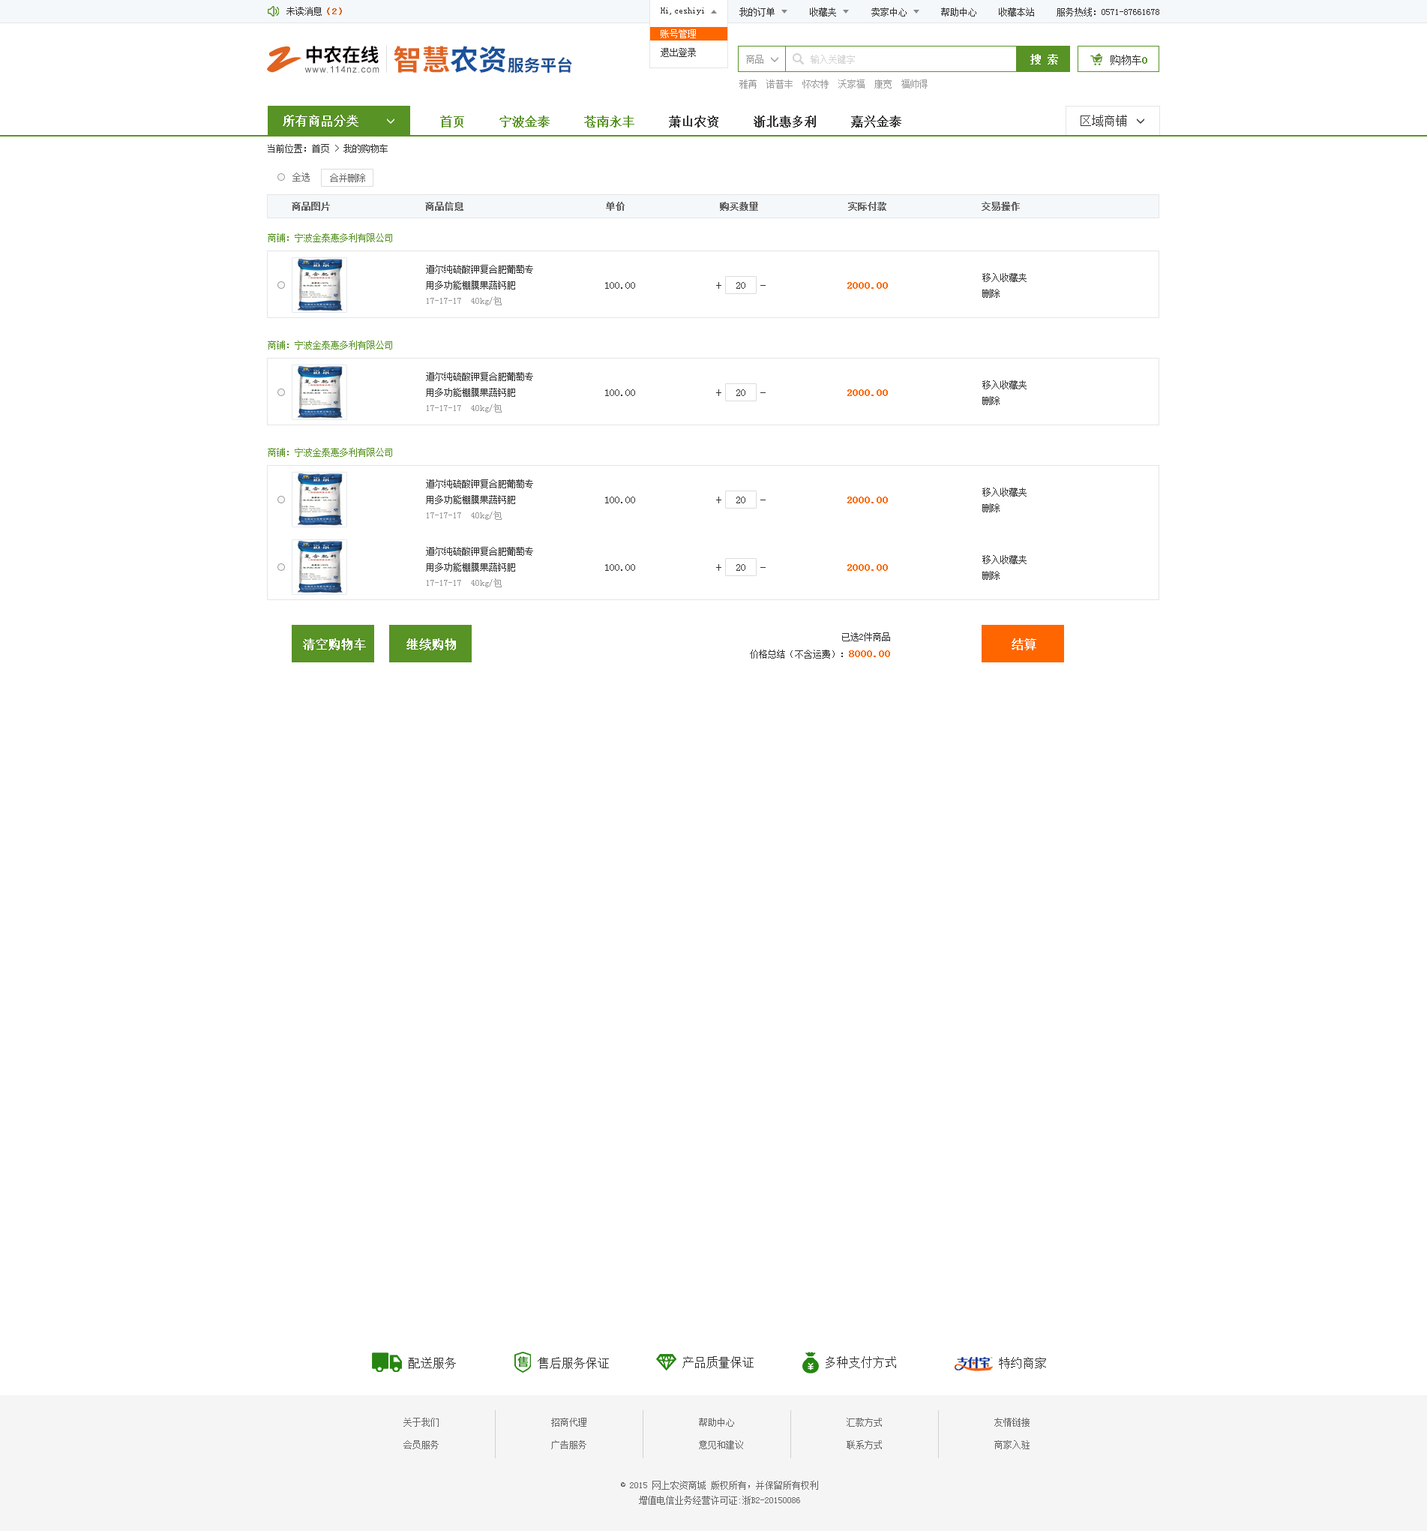
<style>
.page{position:relative;width:1427px;height:1537px;background:#ffffff}
.page>*{position:absolute;margin:0}
.t1{font:9px "SimSun";color:#333333}
.t2{font:9px "SimSun";color:#e0631f;font-weight:bold}
.t3{font:9px/18.8px "SimSun";color:#ffffff}
.t4{font:9px/18.8px "SimSun";color:#333333}
.t5{font:38px "SmudgerLetPlain";color:#e0631f}
.t6{font:18.6px "SourceHanSansCN-Bold";color:#060001}
.t7{font:28.4px "SourceHanSansCN-Bold";color:#e0631f}
.t8{font:28.4px "SourceHanSansCN-Bold";color:#1a529c}
.t9{font:10.5px "SimSun";color:#ffffff;font-weight:bold}
.t10{font:16.3px "SourceHanSansCN-Bold";color:#194f93}
.t11{font:9px "SimSun";color:#999999}
.t12{font:9px "SimSun";color:#d1d1d1}
.t13{font:10.5px "SimSun";color:#333333}
.t14{font:10.5px "SimSun";color:#589325;font-weight:bold}
.t15{font:8.9px "ArialMT";letter-spacing:0.1em;color:#585859}
.t16{font:12px "SimSun";color:#ffffff;font-weight:bold}
.t17{font:12px "SimSun";color:#333333;font-weight:bold}
.t18{font:12px "SimSun";color:#589325;font-weight:bold}
.t19{font:12px "SimSun";color:#333333}
.t20{font:9px "SimSun";color:#666666}
.t21{font:9px "SimSun";color:#666666;font-weight:bold}
.t22{font:9px "SimSun";color:#589325}
.t23{font:10.5px "SimSun";color:#ff6600;font-weight:bold}
.t24{font:9px/22.5px "SimSun";color:#666666}
.t25{font:9px/15px "SimSun";color:#666666}
</style>
<div class="page">
<p class="t1" style="left:286px;top:7px;width:56px;height:9px">未读消息<span class="t2">（2）</span></p>
<p class="t1" style="left:661px;top:8px;width:43px;height:7px">Hi,ceshiyi</p>
<p class="t1" style="left:661px;top:8px;width:43px;height:7px">Hi,ceshiyi</p>
<p class="t1" style="left:740px;top:8px;width:35px;height:8px">我的订单</p>
<p class="t1" style="left:810px;top:8px;width:26px;height:8px">收藏夹</p>
<p class="t1" style="left:872px;top:8px;width:35px;height:8px">卖家中心</p>
<p class="t1" style="left:941px;top:8px;width:35px;height:8px">帮助中心</p>
<p class="t1" style="left:999px;top:8px;width:35px;height:8px">收藏本站</p>
<p class="t1" style="left:1057px;top:8px;width:103px;height:8px">服务热线：0571-87661678</p>
<p class="t3" style="left:661px;top:29px;width:35px;height:28px">账号管理<br><span class="t4">退出登录</span></p>
<p class="t5" style="left:267px;top:46px;width:35px;height:27px">Z</p>
<p class="t6" style="left:306px;top:46px;width:73px;height:18px">中农在线</p>
<p class="t7" style="left:394px;top:46px;width:112px;height:27px">智慧<span class="t8">农资</span></p>
<p class="t9" style="left:1030px;top:54px;width:28px;height:10px">搜 索</p>
<p class="t10" style="left:508px;top:57px;width:64px;height:16px">服务平台</p>
<p class="t11" style="left:746px;top:55px;width:18px;height:9px">商品</p>
<p class="t12" style="left:811px;top:55px;width:44px;height:9px">输入关键字</p>
<p class="t13" style="left:1111px;top:55px;width:37px;height:10px">购物车<span class="t14">0</span></p>
<p class="t15" style="left:304px;top:66px;width:76px;height:7px">www.114nz.com</p>
<p class="t11" style="left:740px;top:80px;width:188px;height:8px">雅苒  诺普丰  怀农特  沃家福  康宽  福帅得</p>
<p class="t16" style="left:283px;top:115px;width:75px;height:12px">所有商品分类</p>
<p class="t17" style="left:440px;top:116px;width:462px;height:12px"><span class="t18">首页     宁波金泰     苍南永丰    </span> 萧山农资     浙北惠多利     嘉兴金泰</p>
<p class="t19" style="left:1081px;top:115px;width:46px;height:12px">区域商铺</p>
<p class="t1" style="left:268px;top:144px;width:120px;height:9px">当前位置：首页 &gt; 我的购物车</p>
<p class="t20" style="left:292px;top:172px;width:18px;height:10px">全选</p>
<p class="t20" style="left:330px;top:173px;width:35px;height:9px">合并删除</p>
<p class="t21" style="left:292px;top:202px;width:728px;height:9px">商品图片                  商品信息                           单价                  购买数量                 实际付款                  交易操作</p>
<p class="t22" style="left:268px;top:233px;width:124px;height:9px">商铺：宁波金泰惠多利有限公司</p>
<p class="t1" style="left:426px;top:265px;width:107px;height:40px">道尔纯硫酸钾复合肥葡萄专<br>用多功能棚膜果蔬钙肥<br><span class="t11">17-17-17  40kg/包</span></p>
<p class="t1" style="left:982px;top:273px;width:45px;height:25px">移入收藏夹<br>删除</p>
<p class="t13" style="left:605px;top:282px;width:30px;height:7px">100.00</p>
<p class="t19" style="left:716px;top:282px;width:6px;height:7px">+</p>
<p class="t13" style="left:736px;top:282px;width:10px;height:7px">20</p>
<p class="t23" style="left:848px;top:282px;width:40px;height:7px">2000.00</p>
<p class="t22" style="left:268px;top:340px;width:124px;height:10px">商铺：宁波金泰惠多利有限公司</p>
<p class="t1" style="left:426px;top:372px;width:107px;height:40px">道尔纯硫酸钾复合肥葡萄专<br>用多功能棚膜果蔬钙肥<br><span class="t11">17-17-17  40kg/包</span></p>
<p class="t13" style="left:605px;top:389px;width:30px;height:7px">100.00</p>
<p class="t19" style="left:716px;top:389px;width:6px;height:7px">+</p>
<p class="t13" style="left:736px;top:389px;width:10px;height:7px">20</p>
<p class="t23" style="left:848px;top:389px;width:40px;height:7px">2000.00</p>
<p class="t1" style="left:982px;top:380px;width:45px;height:25px">移入收藏夹<br>删除</p>
<p class="t22" style="left:268px;top:448px;width:124px;height:9px">商铺：宁波金泰惠多利有限公司</p>
<p class="t1" style="left:426px;top:479px;width:107px;height:41px">道尔纯硫酸钾复合肥葡萄专<br>用多功能棚膜果蔬钙肥<br><span class="t11">17-17-17  40kg/包</span></p>
<p class="t13" style="left:605px;top:496px;width:30px;height:7px">100.00</p>
<p class="t19" style="left:716px;top:496px;width:6px;height:7px">+</p>
<p class="t13" style="left:736px;top:496px;width:10px;height:7px">20</p>
<p class="t23" style="left:848px;top:496px;width:40px;height:7px">2000.00</p>
<p class="t1" style="left:982px;top:488px;width:45px;height:24px">移入收藏夹<br>删除</p>
<p class="t1" style="left:426px;top:547px;width:107px;height:40px">道尔纯硫酸钾复合肥葡萄专<br>用多功能棚膜果蔬钙肥<br><span class="t11">17-17-17  40kg/包</span></p>
<p class="t1" style="left:982px;top:555px;width:45px;height:25px">移入收藏夹<br>删除</p>
<p class="t13" style="left:605px;top:564px;width:30px;height:7px">100.00</p>
<p class="t19" style="left:716px;top:564px;width:6px;height:7px">+</p>
<p class="t13" style="left:736px;top:564px;width:10px;height:7px">20</p>
<p class="t23" style="left:848px;top:564px;width:40px;height:7px">2000.00</p>
<p class="t16" style="left:303px;top:638px;width:63px;height:12px">清空购物车</p>
<p class="t16" style="left:406px;top:638px;width:50px;height:12px">继续购物</p>
<p class="t1" style="left:750px;top:632px;width:140px;height:26px;text-align:right">已选2件商品<br>价格总结（不含运费）：<span class="t23">8000.00</span></p>
<p class="t16" style="left:1012px;top:638px;width:24px;height:12px">结算</p>
<p class="t19" style="left:409px;top:1357px;width:47px;height:12px">配送服务</p>
<p class="t19" style="left:538px;top:1357px;width:71px;height:12px">售后服务保证</p>
<p class="t19" style="left:682px;top:1356px;width:72px;height:12px">产品质量保证</p>
<p class="t19" style="left:826px;top:1356px;width:70px;height:12px">多种支付方式</p>
<p class="t19" style="left:999px;top:1357px;width:47px;height:12px">特约商家</p>
<p class="t24" style="left:404px;top:1418px;width:35px;height:31px">关于我们<br>会员服务</p>
<p class="t24" style="left:551px;top:1418px;width:35px;height:31px">招商代理<br>广告服务</p>
<p class="t24" style="left:699px;top:1418px;width:44px;height:31px">帮助中心<br>意见和建议</p>
<p class="t24" style="left:847px;top:1418px;width:35px;height:31px">汇款方式<br>联系方式</p>
<p class="t24" style="left:994px;top:1418px;width:36px;height:31px">友情链接<br>商家入驻</p>
<p class="t25" style="left:621px;top:1480px;width:197px;height:24px;text-align:center">© 2015 网上农资商城 版权所有，并保留所有权利<br>增值电信业务经营许可证:浙B2-20150086</p>
</div>
